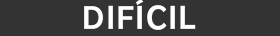
<style>
.page{position:relative;width:280px;height:36px;background:#333333}
.page>*{position:absolute;margin:0}
.t1{font:29.3px "RodinPro-B";letter-spacing:0.018em;color:#ffffff}
</style>
<div class="page">
<p class="t1" style="left:84px;top:0px;width:112px;height:30px">DIFÍCIL</p>
</div>
